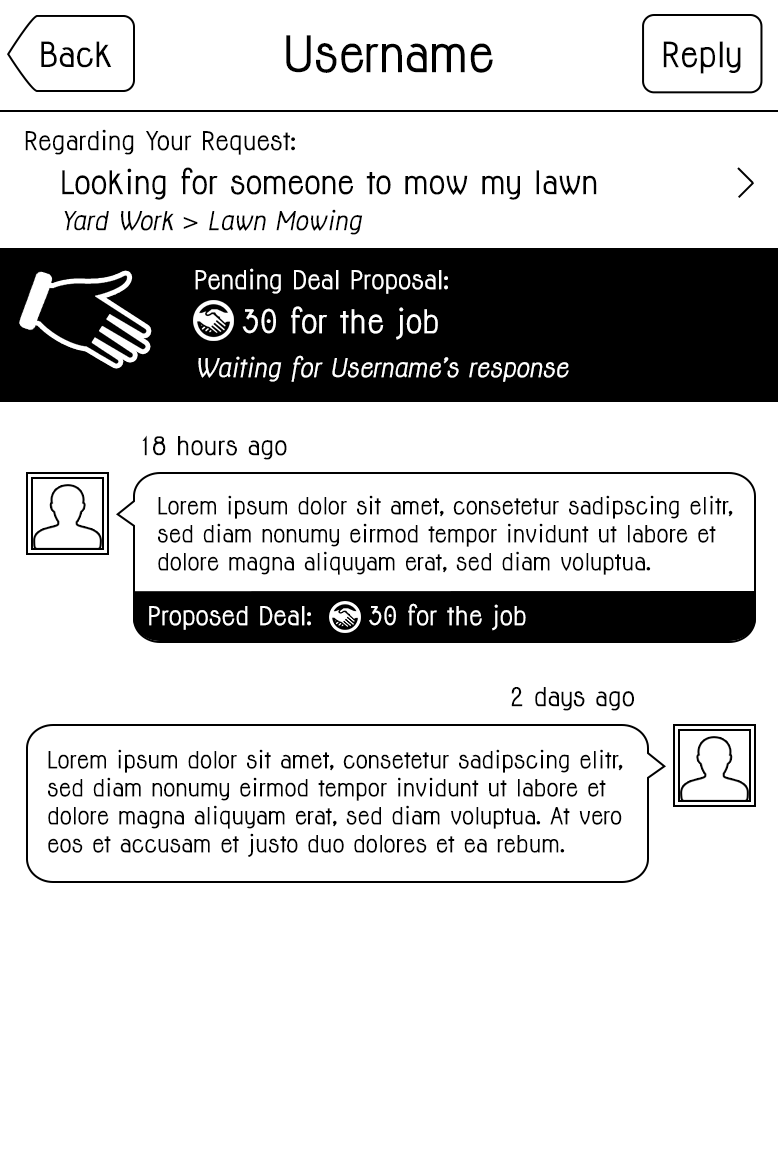
<style>
.page{position:relative;width:778px;height:1167px;background:#ffffff}
.page>*{position:absolute;margin:0}
.t1{font:32px "Jolly-Bold";color:#000000}
.t2{font:46.2px "Jolly-Bold";color:#000000}
.t3{font:32.1px "Jolly-Bold";color:#000000}
.t4{font:30px/44px "Jolly-Bold";color:#000000}
.t5{font:24px/30px "Jolly-Bold";color:#000000}
.t6{font:24px "Jolly-BoldItalic";color:#000000}
.t7{font:24px/44px "Jolly-BoldItalic";color:#ffffff}
.t8{font:24px/30px "Jolly-Bold";color:#ffffff}
.t9{font:30px/44px "Jolly-Bold";color:#ffffff}
.t10{font:24px "Jolly-Bold";color:#000000}
.t11{font:22px/28px "Jolly-Bold";color:#000000}
.t12{font:24px "Jolly-Bold";color:#ffffff}
</style>
<div class="page">
<p class="t1" style="left:41px;top:41px;width:71px;height:27px">Back</p>
<p class="t2" style="left:286px;top:35px;width:207px;height:38px">Username</p>
<p class="t3" style="left:663px;top:41px;width:78px;height:33px">Reply</p>
<p class="t4" style="left:25px;top:129px;width:572px;height:106px"><span class="t5">Regarding Your Request:<br> </span>Looking for someone to mow my lawn<br> <span class="t6">Yard Work &gt; Lawn Mowing</span></p>
<p class="t7" style="left:195px;top:268px;width:374px;height:114px"><span class="t8">Pending Deal Proposal:<br></span><span class="t9">    30 for the job<br></span>Waiting for Username’s response</p>
<p class="t10" style="left:142px;top:435px;width:145px;height:25px">1v8 hours ago</p>
<p class="t11" style="left:158px;top:495px;width:575px;height:80px">Lorem ipsum dolor sit amet, consetetur sadipscing elitr, sed diam nonumy eirmod tempor invidunt ut labore et dolore magna aliquyam erat, sed diam voluptua.</p>
<p class="t12" style="left:149px;top:603px;width:377px;height:28px">Proposed Deal:      30 for the job</p>
<p class="t10" style="left:511px;top:687px;width:123px;height:24px">2 days ago</p>
<p class="t11" style="left:48px;top:749px;width:575px;height:108px">Lorem ipsum dolor sit amet, consetetur sadipscing elitr, sed diam nonumy eirmod tempor invidunt ut labore et dolore magna aliquyam erat, sed diam voluptua. At vero eos et accusam et justo duo dolores et ea rebum.</p>
</div>
